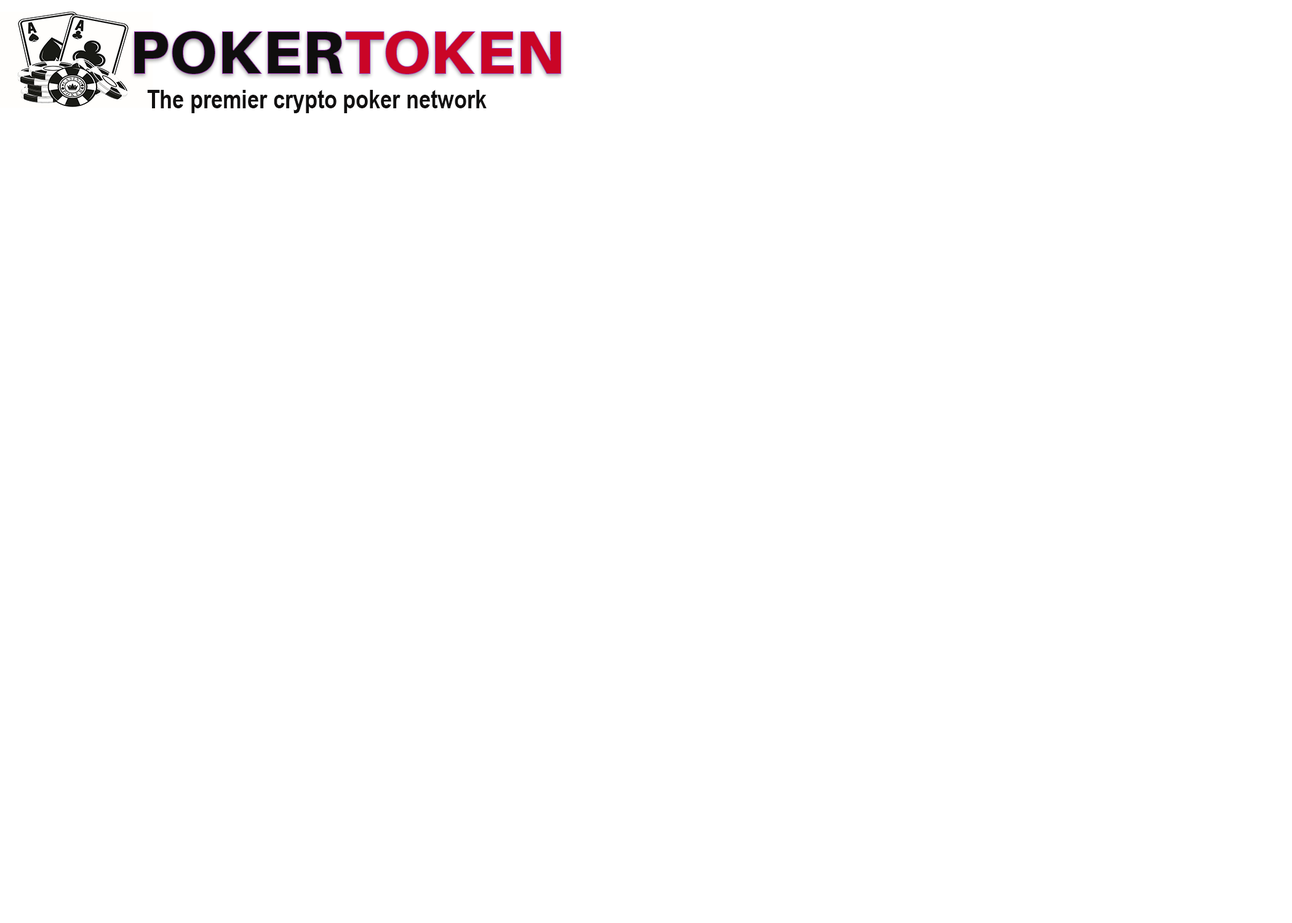
<style>
.page{position:relative;width:1292px;height:923px;background:#ffffff}
.page>*{position:absolute;margin:0}
.t1{font:61.5px "Aileron-Black";color:#0f0e0e}
.t2{font:61.5px "Aileron-Black";color:#ca0526}
.t3{font:25.6px "ArialNarrow-Bold";color:#111010}
.t4{font:25.6px "ArialNarrow-Bold";color:#0f0e0e}
</style>
<div class="page">
<p class="t1" style="left:134px;top:31px;width:427px;height:43px">POKER<span class="t2">TOKEN</span></p>
<p class="t3" style="left:147px;top:90px;width:340px;height:23px"><span class="t4">   </span>The premier crypto poker network</p>
</div>
